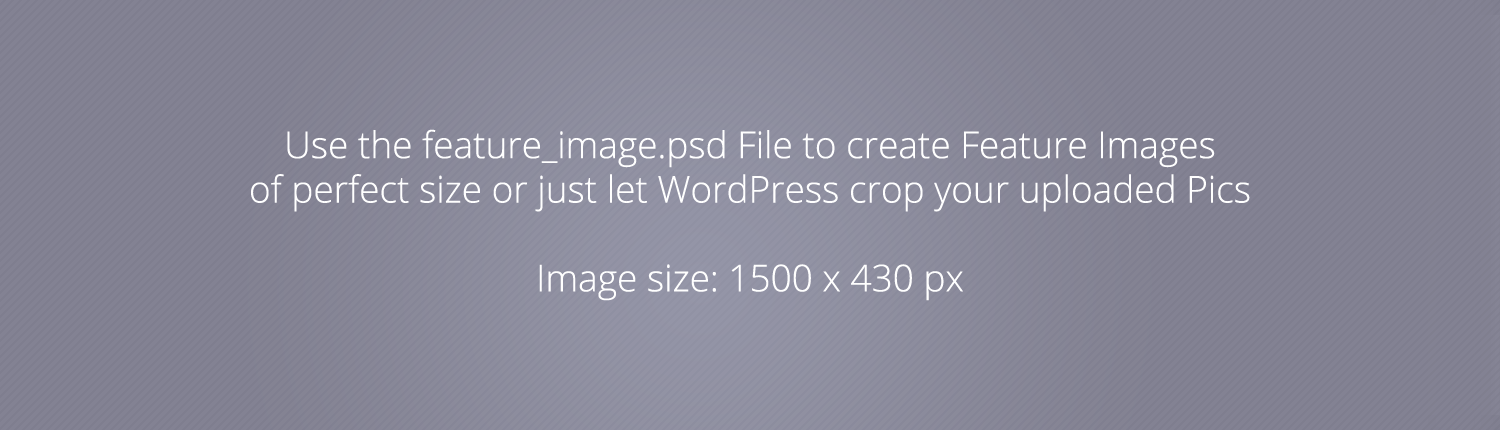
<style>
.page{position:relative;width:1500px;height:430px;background:#838293}
.page>*{position:absolute;margin:0}
.t1{font:37px "OpenSans-Light";color:#ffffff}
</style>
<div class="page">
<p class="t1" style="left:251px;top:129px;width:999px;height:172px;text-align:center">Use the feature_image.psd File to create Feature Images<br>of perfect size or just let WordPress crop your uploaded Pics<br><br>Image size: 1500 x 430 px</p>
</div>
